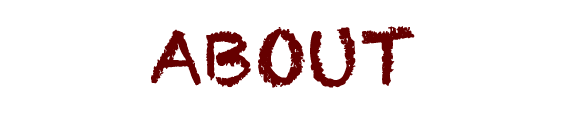
<style>
.page{position:relative;width:567px;height:113px;background:#ffffff}
.page>*{position:absolute;margin:0}
.t1{font:72px "Chalkduster";letter-spacing:0.005em;color:#660000;font-weight:bold}
</style>
<div class="page">
<p class="t1" style="left:151px;top:26px;width:264px;height:62px">ABOUT</p>
</div>
